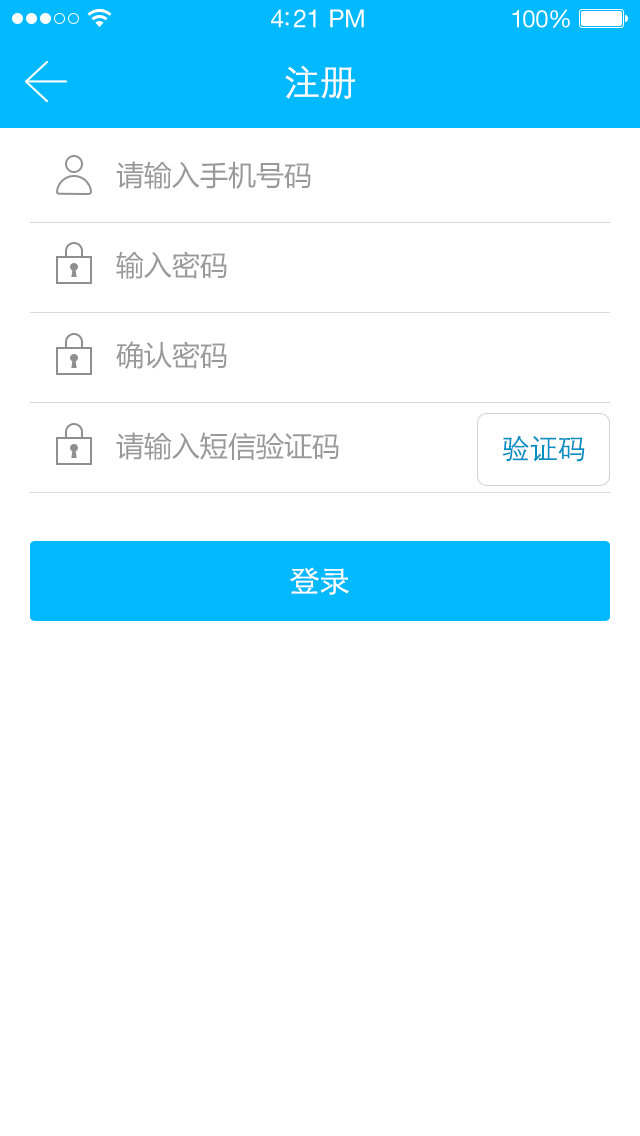
<style>
.page{position:relative;width:640px;height:1136px;background:#ffffff}
.page>*{position:absolute;margin:0}
.t1{font:25px "HelveticaNeueLTStd-Roman";letter-spacing:-0.02em;color:#ffffff}
.t2{font:24px "HelveticaNeueLTStd-Roman";letter-spacing:-0.02em;color:#ffffff}
.t3{font:36px "STXihei";color:#ffffff;text-transform:uppercase}
.t4{font:28px "MicrosoftYaHei";color:#999999}
.t5{font:28px "STXihei";color:#028fc4;text-transform:uppercase}
.t6{font:30px "STXihei";color:#ffffff}
</style>
<div class="page">
<p class="t1" style="left:271px;top:9px;width:93px;height:19px">4:21 PM</p>
<p class="t2" style="left:512px;top:9px;width:58px;height:19px">100%</p>
<p class="t3" style="left:285px;top:65px;width:70px;height:34px">注册</p>
<p class="t4" style="left:116px;top:161px;width:195px;height:28px">请输入手机号码</p>
<p class="t4" style="left:116px;top:251px;width:111px;height:28px">输入密码</p>
<p class="t4" style="left:116px;top:341px;width:111px;height:28px">确认密码</p>
<p class="t4" style="left:116px;top:432px;width:223px;height:28px">请输入短信验证码</p>
<p class="t5" style="left:502px;top:435px;width:83px;height:27px">验证码</p>
<p class="t6" style="left:290px;top:567px;width:59px;height:28px">登录</p>
</div>
